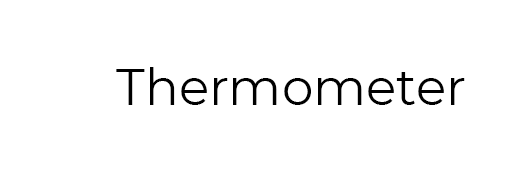
<style>
.page{position:relative;width:527px;height:180px;background:#ffffff}
.page>*{position:absolute;margin:0}
.t1{font:50px "Montserrat-Regular";color:#000000}
</style>
<div class="page">
<p class="t1" style="left:116px;top:67px;width:349px;height:38px">Thermometer</p>
</div>
